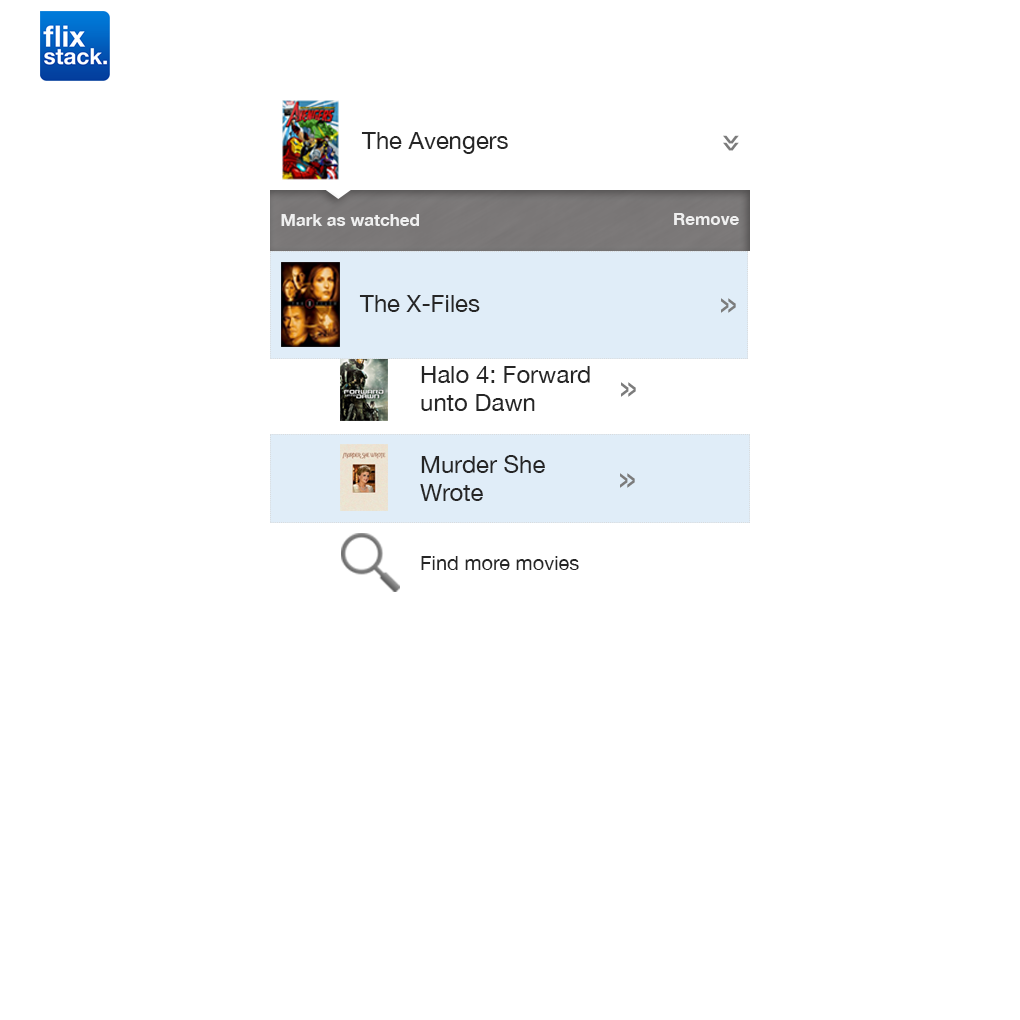
<style>
.page{position:relative;width:1020px;height:1020px;background:#ffffff}
.page>*{position:absolute;margin:0}
.t1{font:24px "HelveticaNeue";color:#262626}
.t2{font:30px "HelveticaNeue-Bold";color:#7c7c7c;scale:0.51 1}
.t3{font:17px "HelveticaNeue-Bold";color:#efefef}
.t4{font:30px "HelveticaNeue-Bold";color:#7c7c7c;scale:0.52 1}
.t5{font:20px "HelveticaNeue";color:#262626}
</style>
<div class="page">
<p class="t1" style="left:361px;top:132px;width:147px;height:22px">The Avengers</p>
<p class="t2" style="left:723px;top:135px;width:16px;height:9px;rotate:90deg">&gt;</p>
<p class="t2" style="left:723px;top:142px;width:16px;height:9px;rotate:90deg">&gt;</p>
<p class="t3" style="left:281px;top:214px;width:138px;height:12px">Mark as watched</p>
<p class="t3" style="left:674px;top:213px;width:65px;height:12px">Remove</p>
<p class="t1" style="left:359px;top:295px;width:121px;height:17px">The X-Files</p>
<p class="t4" style="left:721px;top:298px;width:8px;height:15px">&gt;</p>
<p class="t4" style="left:728px;top:298px;width:8px;height:15px">&gt;</p>
<p class="t1" style="left:421px;top:366px;width:169px;height:45px">Halo 4: Forward unto Dawn</p>
<p class="t4" style="left:621px;top:382px;width:8px;height:15px">&gt;</p>
<p class="t4" style="left:628px;top:382px;width:8px;height:15px">&gt;</p>
<p class="t1" style="left:420px;top:455px;width:125px;height:46px">Murder She Wrote</p>
<p class="t4" style="left:620px;top:473px;width:8px;height:15px">&gt;</p>
<p class="t4" style="left:627px;top:473px;width:8px;height:15px">&gt;</p>
<p class="t5" style="left:421px;top:556px;width:158px;height:14px">Find more movies</p>
</div>
